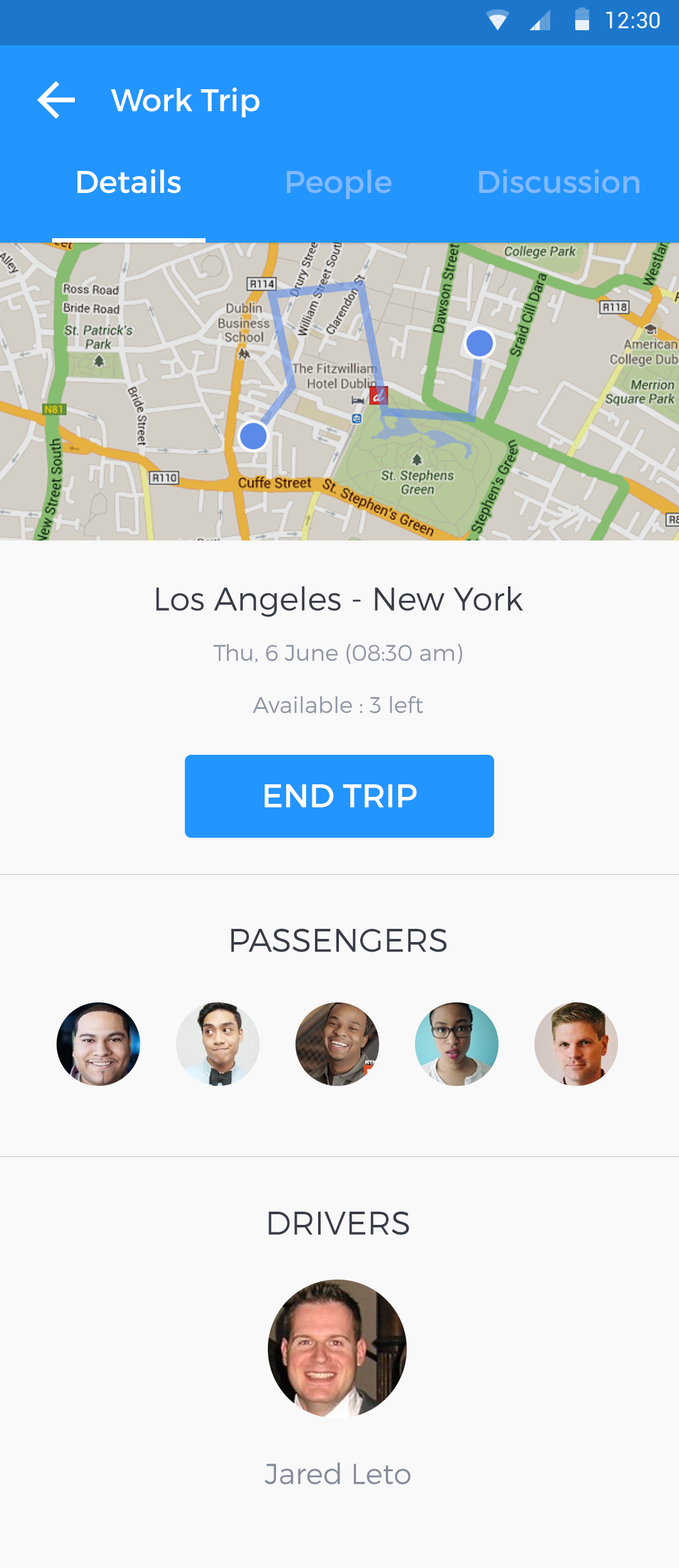
<style>
.page{position:relative;width:679px;height:1568px;background:#f9f9f9}
.page>*{position:absolute;margin:0}
.t1{font:31.4px "Montserrat-Regular";color:#ffffff}
.t2{font:31.4px "Montserrat-Regular";color:#7fb9ff}
.t3{font:32.7px "Montserrat-Light";color:#383c46}
.t4{font:22.6px "Montserrat-Light";color:#8d94a4}
.t5{font:32.7px "Montserrat-Regular";color:#ffffff;text-transform:uppercase}
.t6{font:28.9px "Montserrat-Light";color:#858b99}
</style>
<div class="page">
<p class="t1" style="left:111px;top:87px;width:149px;height:31px">Work Trip</p>
<p class="t1" style="left:77px;top:169px;width:104px;height:25px">Details</p>
<p class="t2" style="left:287px;top:170px;width:105px;height:29px">People</p>
<p class="t2" style="left:479px;top:169px;width:160px;height:25px">Discussion</p>
<p class="t3" style="left:156px;top:586px;width:367px;height:31px">Los Angeles - New York</p>
<p class="t4" style="left:213px;top:644px;width:249px;height:20px">Thu, 6 June (08:30 am)</p>
<p class="t4" style="left:253px;top:696px;width:170px;height:17px">Available : 3 left</p>
<p class="t5" style="left:265px;top:784px;width:152px;height:24px">END TRIP</p>
<p class="t3" style="left:231px;top:928px;width:216px;height:24px">PASSENGERS</p>
<p class="t3" style="left:268px;top:1211px;width:141px;height:24px">DRIVERS</p>
<p class="t6" style="left:265px;top:1462px;width:145px;height:22px">Jared Leto</p>
</div>
